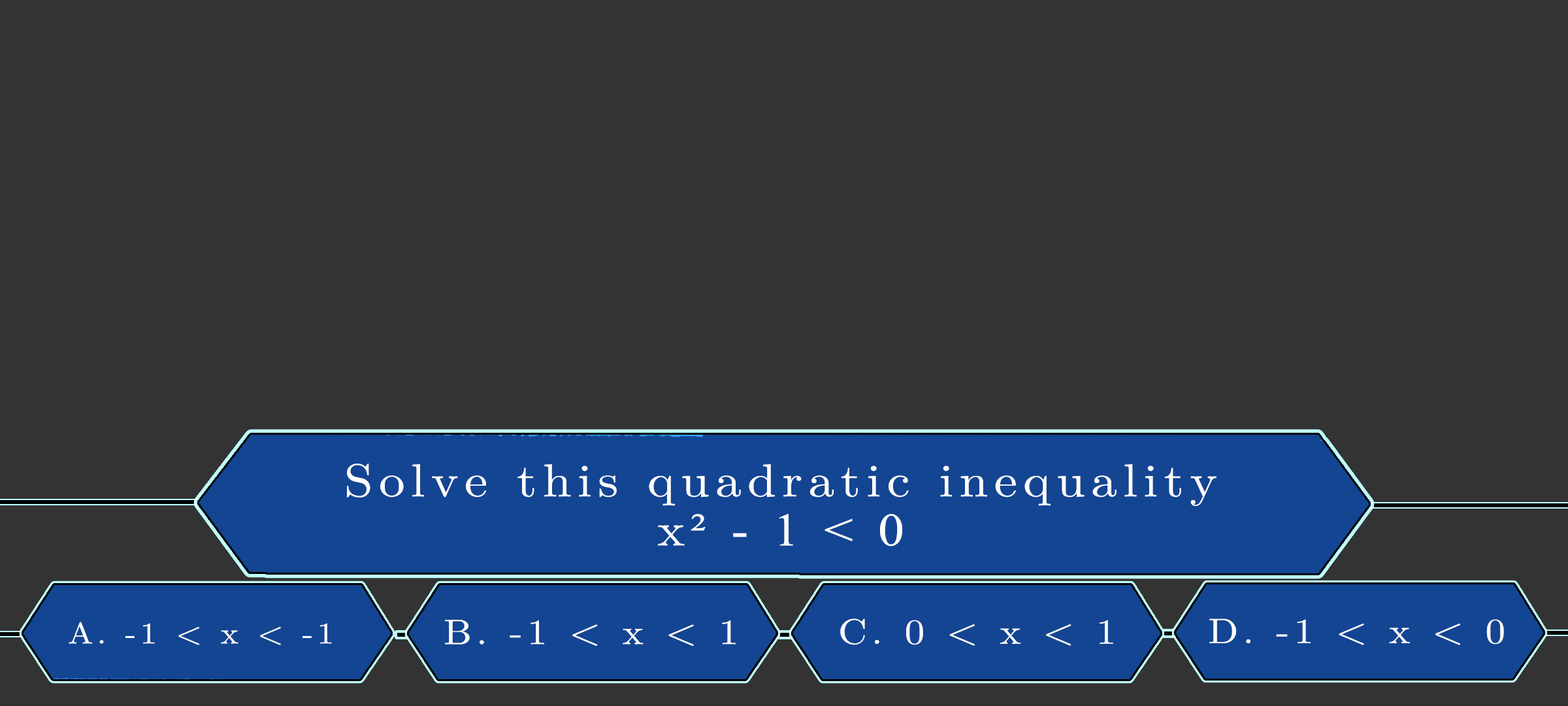
<style>
.page{position:relative;width:1568px;height:706px;background:#333333}
.page>*{position:absolute;margin:0}
.t1{font:46.3px/49px "LatinModernMath-Regular";letter-spacing:0.115em;color:#ffffff;scale:1.12 1}
.t2{font:46.3px/49px "TimesNewRomanPSMT";letter-spacing:0.115em;color:#ffffff;scale:1.12 1}
.t3{font:29.9px "LatinModernMath-Regular";letter-spacing:0.115em;color:#fefdfd;text-transform:uppercase;scale:1.12 1}
.t4{font:29.9px "LatinModernMath-Regular";letter-spacing:0.115em;color:#fefdfd;scale:1.12 1}
.t5{font:35.4px "LatinModernMath-Regular";letter-spacing:0.115em;color:#fefdfd;text-transform:uppercase;scale:1.12 1}
.t6{font:35.4px "LatinModernMath-Regular";letter-spacing:0.115em;color:#fefdfd;scale:1.12 1}
.t7{font:35.4px "LatinModernMath-Regular";letter-spacing:0.115em;color:#fcfafa;scale:1.12 1}
.t8{font:35.4px "LatinModernMath-Regular";letter-spacing:0.115em;color:#fdfcfc;text-transform:uppercase;scale:1.12 1}
.t9{font:35.4px "LatinModernMath-Regular";letter-spacing:0.115em;color:#fdfcfc;scale:1.12 1}
</style>
<div class="page">
<p class="t1" style="left:347px;top:463px;width:870px;height:83px;text-align:center">Solve this quadratic inequality<br>x<span class="t2">² - 1 &lt; 0</span></p>
<p class="t3" style="left:69px;top:621px;width:263px;height:24px">a. -1 &lt;<span class="t4"> x </span>&lt; -1</p>
<p class="t5" style="left:445px;top:619px;width:291px;height:26px">b. -1 &lt; <span class="t6">x </span>&lt; 1</p>
<p class="t7" style="left:840px;top:618px;width:273px;height:27px">C. 0 &lt; x &lt; 1</p>
<p class="t8" style="left:1209px;top:618px;width:295px;height:27px">d. -1 &lt; <span class="t9">x</span> &lt; 0</p>
</div>
